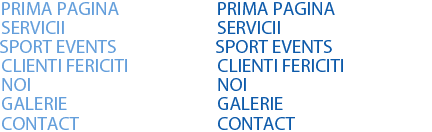
<style>
.page{position:relative;width:432px;height:132px;background:#ffffff}
.page>*{position:absolute;margin:0}
.t1{font:19px "MyriadPro-Regular";color:#639edb}
.t2{font:19px "MyriadPro-Regular";color:#0d5aaa}
</style>
<div class="page">
<p class="t1" style="left:2px;top:2px;width:117px;height:13px">PRIMA PAGINA</p>
<p class="t2" style="left:218px;top:2px;width:117px;height:13px">PRIMA PAGINA</p>
<p class="t1" style="left:1px;top:21px;width:63px;height:13px">SERVICII</p>
<p class="t2" style="left:217px;top:21px;width:63px;height:13px">SERVICII</p>
<p class="t1" style="left:0px;top:40px;width:116px;height:13px">SPORT EVENTS</p>
<p class="t2" style="left:216px;top:40px;width:116px;height:13px">SPORT EVENTS</p>
<p class="t1" style="left:2px;top:59px;width:125px;height:13px">CLIENTI FERICITI</p>
<p class="t2" style="left:218px;top:59px;width:125px;height:13px">CLIENTI FERICITI</p>
<p class="t1" style="left:2px;top:78px;width:28px;height:13px">NOI</p>
<p class="t2" style="left:218px;top:78px;width:28px;height:13px">NOI</p>
<p class="t1" style="left:2px;top:97px;width:65px;height:13px">GALERIE</p>
<p class="t2" style="left:218px;top:97px;width:65px;height:13px">GALERIE</p>
<p class="t1" style="left:2px;top:117px;width:77px;height:13px">CONTACT</p>
<p class="t2" style="left:218px;top:117px;width:77px;height:13px">CONTACT</p>
</div>
